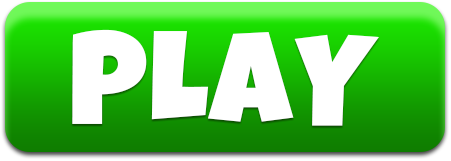
<style>
.page{position:relative;width:451px;height:161px;background:#ffffff}
.page>*{position:absolute;margin:0}
.t1{font:130px "LuckiestGuy-Regular";color:#ffffff;text-transform:uppercase}
</style>
<div class="page">
<p class="t1" style="left:72px;top:29px;width:307px;height:97px">PLAY</p>
</div>
